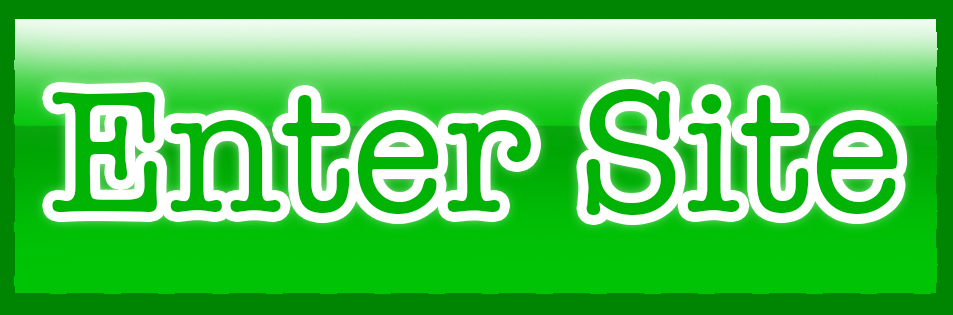
<style>
.page{position:relative;width:953px;height:315px}
.page>*{position:absolute;margin:0}
.t1{font:176.7px "AmericanTypewriter";color:#00b305}
</style>
<div class="page">
<p class="t1" style="left:52px;top:89px;width:846px;height:126px">Enter Site</p>
</div>
